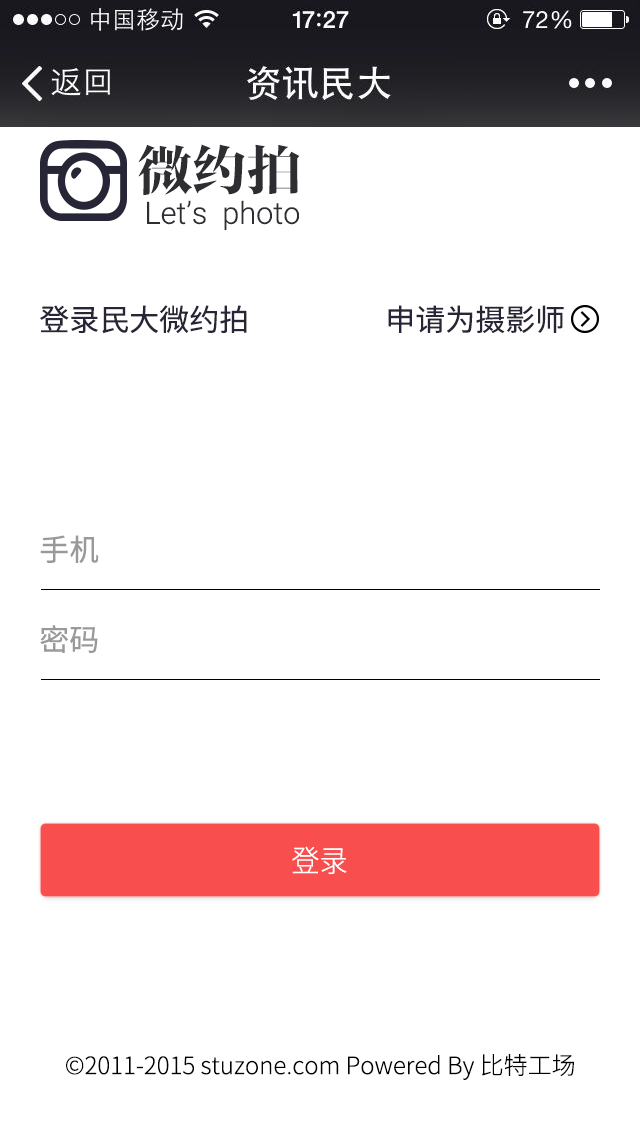
<style>
.page{position:relative;width:640px;height:1136px;background:#ffffff}
.page>*{position:absolute;margin:0}
.t1{font:54.5px "FZFYSJW--GB1-0";color:#2e2d32}
.t2{font:30.7px "Roboto-Light";color:#2e2d32}
.t3{font:30px "NotoSansHans-Regular";color:#272636}
.t4{font:30px "NotoSansHans-Regular";color:#999999}
.t5{font:30px "NotoSansHans-Light";color:#ffffff;scale:0.94 1}
.t6{font:24px "NotoSansHans-Light";color:#000000}
</style>
<div class="page">
<p class="t1" style="left:138px;top:144px;width:162px;height:51px">微约拍</p>
<p class="t2" style="left:147px;top:200px;width:152px;height:30px">Let’s  photo</p>
<p class="t3" style="left:40px;top:305px;width:207px;height:29px">登录民大微约拍</p>
<p class="t3" style="left:388px;top:305px;width:176px;height:28px">申请为摄影师</p>
<p class="t4" style="left:40px;top:535px;width:59px;height:28px">手机</p>
<p class="t4" style="left:40px;top:625px;width:58px;height:28px">密码</p>
<p class="t5" style="left:292px;top:846px;width:55px;height:28px">登录</p>
<p class="t6" style="left:66px;top:1054px;width:508px;height:26px">©2011-2015 stuzone.com Powered By 比特工场</p>
</div>
